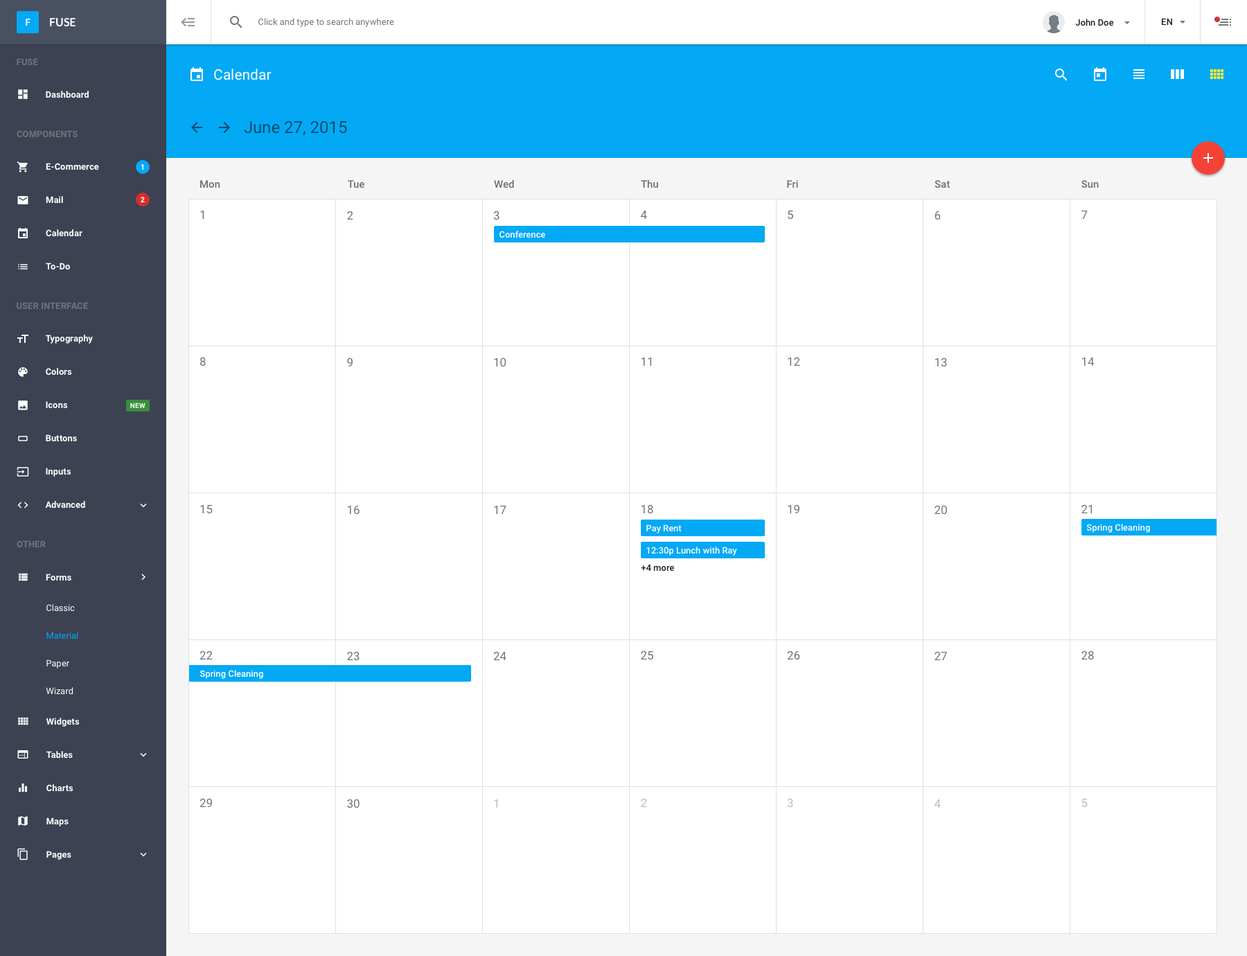
<style>
.page{position:relative;width:1247px;height:956px;background:#ffffff}
.page>*{position:absolute;margin:0}
.t1{font:14.5px "Roboto-Regular";color:#ffffff}
.t2{font:16.6px "Roboto-Regular";color:#014e70}
.t3{font:10.4px "Roboto-Medium";color:#707070}
.t4{font:11.8px "Roboto-Regular";color:#757575}
.t5{font:9px "Roboto-Medium";color:#ffffff}
.t6{font:9px "Roboto-Medium";color:#212121}
.t7{font:11.8px "Roboto-Regular";color:#bdbdbd}
</style>
<div class="page">
<p class="t1" style="left:214px;top:69px;width:58px;height:11px">Calendar</p>
<p class="t2" style="left:244px;top:121px;width:103px;height:15px">June 27, 2015</p>
<p class="t3" style="left:200px;top:180px;width:20px;height:8px">Mon</p>
<p class="t3" style="left:348px;top:180px;width:16px;height:8px">Tue</p>
<p class="t3" style="left:494px;top:179px;width:20px;height:9px">Wed</p>
<p class="t3" style="left:641px;top:179px;width:17px;height:9px">Thu</p>
<p class="t3" style="left:787px;top:180px;width:11px;height:8px">Fri</p>
<p class="t3" style="left:935px;top:180px;width:15px;height:8px">Sat</p>
<p class="t3" style="left:1082px;top:180px;width:17px;height:8px">Sun</p>
<p class="t4" style="left:200px;top:210px;width:4px;height:9px">1</p>
<p class="t4" style="left:640px;top:210px;width:7px;height:9px">4</p>
<p class="t4" style="left:788px;top:210px;width:5px;height:10px">5</p>
<p class="t4" style="left:1082px;top:210px;width:6px;height:9px">7</p>
<p class="t4" style="left:347px;top:211px;width:6px;height:9px">2</p>
<p class="t4" style="left:493px;top:211px;width:7px;height:9px">3</p>
<p class="t4" style="left:935px;top:211px;width:6px;height:9px">6</p>
<p class="t5" style="left:500px;top:231px;width:45px;height:7px">Conference</p>
<p class="t4" style="left:200px;top:357px;width:6px;height:10px">8</p>
<p class="t4" style="left:347px;top:358px;width:6px;height:9px">9</p>
<p class="t4" style="left:494px;top:358px;width:12px;height:9px">10</p>
<p class="t4" style="left:641px;top:357px;width:11px;height:9px">11</p>
<p class="t4" style="left:788px;top:357px;width:12px;height:9px">12</p>
<p class="t4" style="left:935px;top:358px;width:12px;height:9px">13</p>
<p class="t4" style="left:1082px;top:357px;width:13px;height:9px">14</p>
<p class="t4" style="left:200px;top:504px;width:13px;height:10px">15</p>
<p class="t4" style="left:347px;top:505px;width:13px;height:10px">16</p>
<p class="t4" style="left:494px;top:505px;width:12px;height:9px">17</p>
<p class="t4" style="left:641px;top:504px;width:12px;height:10px">18</p>
<p class="t4" style="left:788px;top:504px;width:12px;height:9px">19</p>
<p class="t4" style="left:935px;top:505px;width:12px;height:10px">20</p>
<p class="t4" style="left:1082px;top:504px;width:11px;height:9px">21</p>
<p class="t5" style="left:646px;top:524px;width:36px;height:9px">Pay Rent</p>
<p class="t5" style="left:1086px;top:524px;width:64px;height:9px">Spring Cleaning</p>
<p class="t5" style="left:646px;top:547px;width:91px;height:9px">12:30p Lunch with Ray</p>
<p class="t6" style="left:641px;top:564px;width:33px;height:8px">+4 more</p>
<p class="t4" style="left:200px;top:651px;width:13px;height:9px">22</p>
<p class="t4" style="left:347px;top:651px;width:13px;height:10px">23</p>
<p class="t4" style="left:493px;top:651px;width:13px;height:9px">24</p>
<p class="t4" style="left:641px;top:651px;width:12px;height:9px">25</p>
<p class="t4" style="left:787px;top:651px;width:13px;height:9px">26</p>
<p class="t4" style="left:935px;top:651px;width:12px;height:9px">27</p>
<p class="t4" style="left:1082px;top:651px;width:12px;height:9px">28</p>
<p class="t5" style="left:200px;top:670px;width:63px;height:9px">Spring Cleaning</p>
<p class="t4" style="left:200px;top:798px;width:12px;height:9px">29</p>
<p class="t4" style="left:347px;top:799px;width:13px;height:10px">30</p>
<p class="t7" style="left:494px;top:799px;width:4px;height:9px">1</p>
<p class="t7" style="left:641px;top:798px;width:6px;height:9px">2</p>
<p class="t7" style="left:787px;top:798px;width:6px;height:10px">3</p>
<p class="t7" style="left:934px;top:799px;width:7px;height:9px">4</p>
<p class="t7" style="left:1082px;top:798px;width:6px;height:10px">5</p>
</div>
